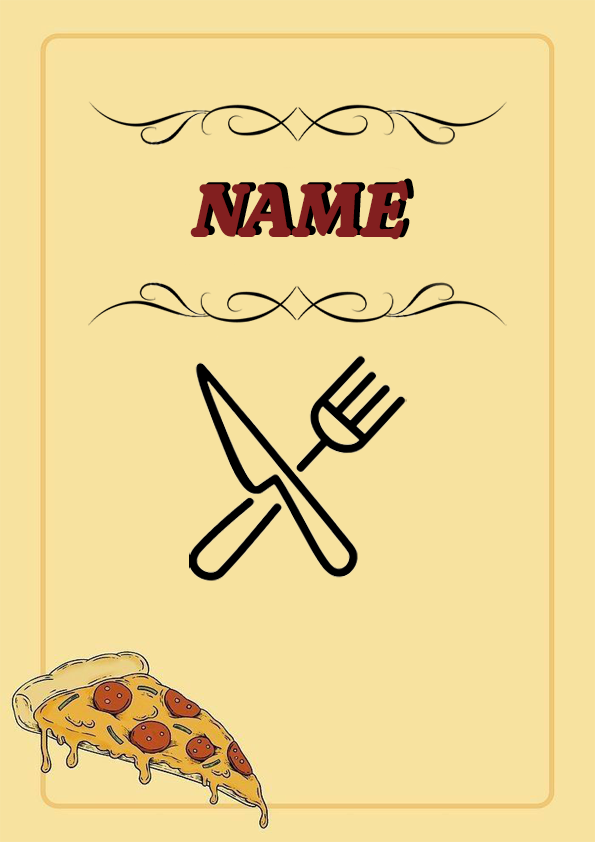
<style>
.page{position:relative;width:595px;height:842px;background:#f7e29f}
.page>*{position:absolute;margin:0}
.t1{font:72px "Kingo";color:#821f1f}
</style>
<div class="page">
<p class="t1" style="left:190px;top:180px;width:218px;height:60px">NAME</p>
</div>
